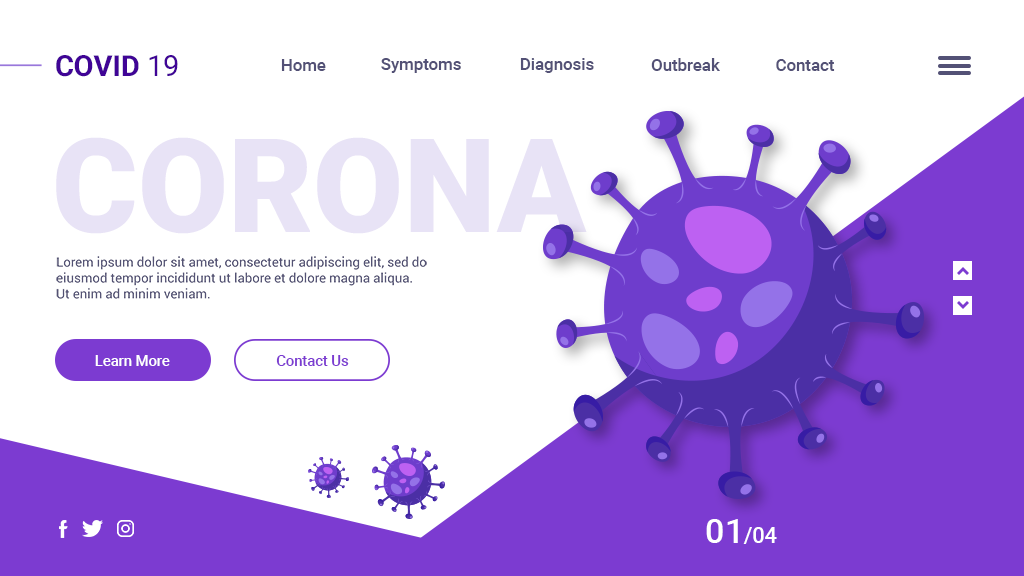
<style>
.page{position:relative;width:1024px;height:576px;background:#ffffff}
.page>*{position:absolute;margin:0}
.t1{font:29px "Roboto-Bold";color:#400496}
.t2{font:29px "Roboto-Regular";color:#400496}
.t3{font:16.8px "Roboto-Medium";color:#535176}
.t4{font:130.8px "Roboto-Black";color:#e8e3f6}
.t5{font:13.2px "Roboto-Regular";color:#535274}
.t6{font:14.8px "Roboto-Medium";color:#ffffff}
.t7{font:14.8px "Roboto-Medium";color:#7c3bd1}
.t8{font:21.6px "Roboto-Medium";color:#ffffff}
.t9{font:33.6px "Roboto-Medium";color:#ffffff}
</style>
<div class="page">
<p class="t1" style="left:56px;top:55px;width:122px;height:22px">COVID<span class="t2"> 19</span></p>
<p class="t3" style="left:281px;top:59px;width:45px;height:12px">Home</p>
<p class="t3" style="left:381px;top:58px;width:80px;height:15px">Symptoms</p>
<p class="t3" style="left:520px;top:58px;width:74px;height:15px">Diagnosis</p>
<p class="t3" style="left:651px;top:58px;width:69px;height:13px">Outbreak</p>
<p class="t3" style="left:776px;top:59px;width:59px;height:12px">Contact</p>
<p class="t4" style="left:56px;top:137px;width:531px;height:97px">CORONA</p>
<p class="t5" style="left:56px;top:256px;width:371px;height:43px">Lorem ipsum dolor sit amet, consectetur adipiscing elit, sed do eiusmod tempor incididunt ut labore et dolore magna aliqua.<br>Ut enim ad minim veniam.</p>
<p class="t6" style="left:95px;top:355px;width:75px;height:11px">Learn More</p>
<p class="t7" style="left:276px;top:355px;width:73px;height:11px">Contact Us</p>
<p class="t8" style="left:706px;top:519px;width:71px;height:25px"><span class="t9">01</span>/04</p>
</div>
